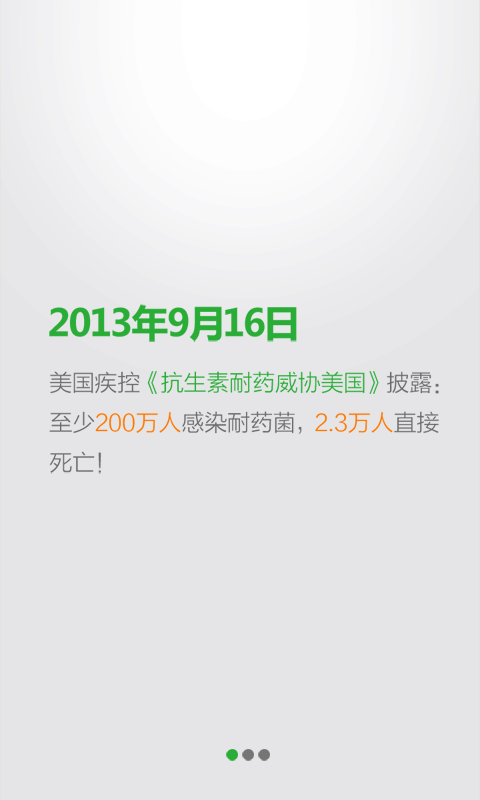
<style>
.page{position:relative;width:480px;height:800px;background:#e5e5e7}
.page>*{position:absolute;margin:0}
.t1{font:37.2px "MicrosoftYaHei-Bold";color:#29ad37}
.t2{font:23.3px/40px "FZLTXHK";color:#29ad37}
.t3{font:23.3px/40px "FZLTXHK";color:#6b6b6b}
.t4{font:23.3px/40px "FZLTXHK";color:#ff7800}
</style>
<div class="page">
<p class="t1" style="left:49px;top:304px;width:248px;height:38px">2013年9月16日</p>
<p class="t2" style="left:49px;top:371px;width:390px;height:103px"><span class="t3">美国疾控</span>《抗生素耐药威协美国》<span class="t3">披露：<br>至少</span><span class="t4">200万人</span><span class="t3">感染耐药菌，</span><span class="t4">2.3万人</span><span class="t3">直接<br>死亡！</span></p>
</div>
